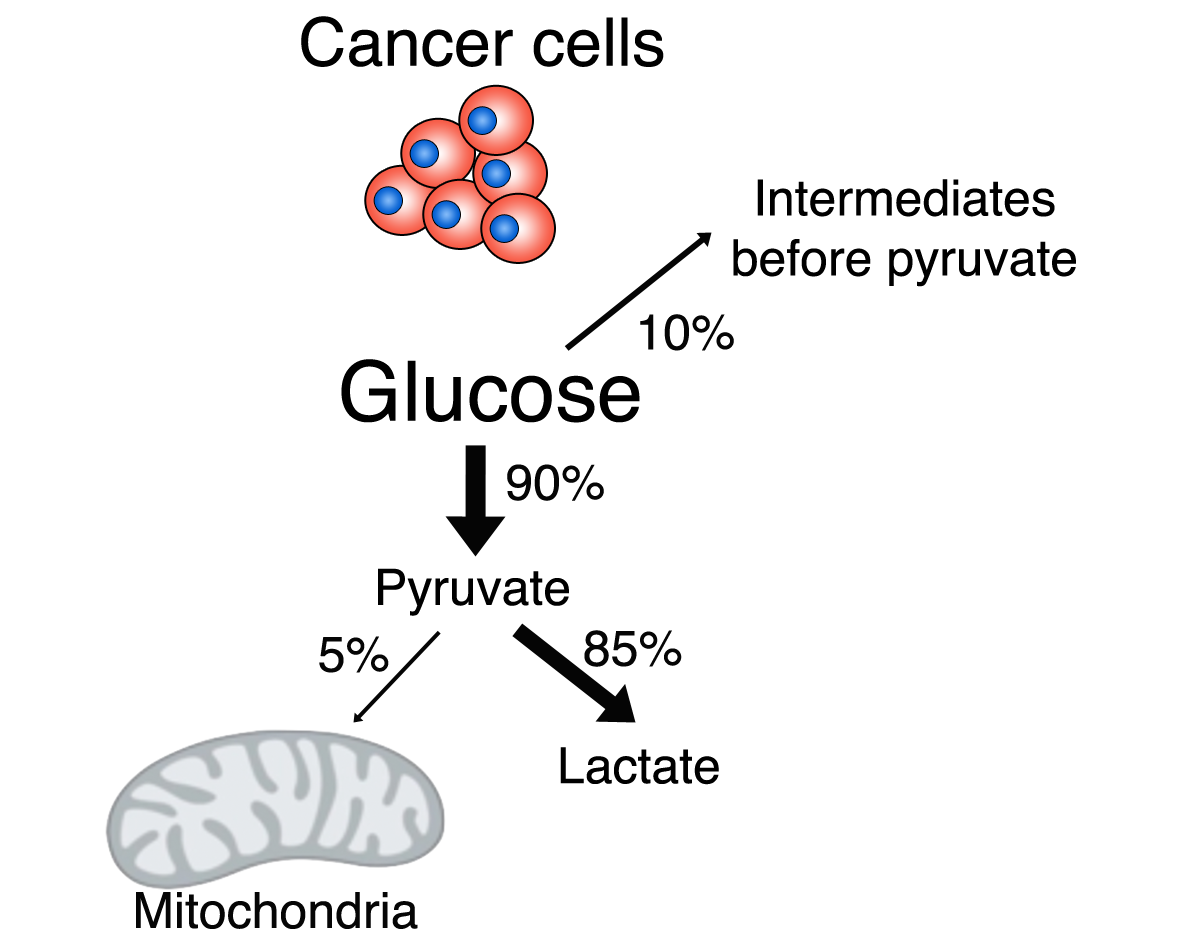
<style>
.page{position:relative;width:1181px;height:945px;background:#ffffff}
.page>*{position:absolute;margin:0}
.t1{font:66.7px "Helvetica";color:#000000}
.t2{font:50px "Helvetica";color:#000000}
.t3{font:50px "Helvetica";color:#050505}
.t4{font:83.3px "Helvetica";color:#000000}
</style>
<div class="page">
<p class="t1" style="left:301px;top:16px;width:363px;height:51px">Cancer cells</p>
<p class="t2" style="left:733px;top:179px;width:343px;height:108px;text-align:center">Intermediates<br>before pyruvate</p>
<p class="t3" style="left:640px;top:314px;width:94px;height:37px">10%</p>
<p class="t4" style="left:341px;top:359px;width:299px;height:64px">Glucose</p>
<p class="t3" style="left:507px;top:464px;width:97px;height:37px">90%</p>
<p class="t2" style="left:378px;top:568px;width:191px;height:48px">Pyruvate</p>
<p class="t3" style="left:584px;top:630px;width:98px;height:37px">85%</p>
<p class="t3" style="left:319px;top:636px;width:70px;height:37px">5%</p>
<p class="t2" style="left:560px;top:747px;width:159px;height:38px">Lactate</p>
<p class="t3" style="left:136px;top:892px;width:282px;height:37px">Mitochondria</p>
</div>
